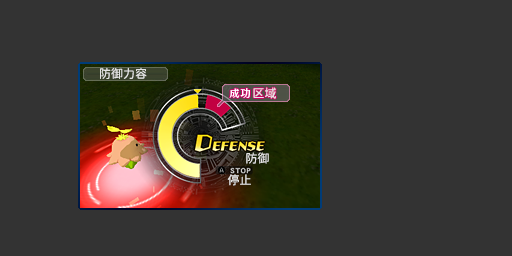
<style>
.page{position:relative;width:512px;height:256px;background:#333333}
.page>*{position:absolute;margin:0}
.t1{font:12px "jiangchengyuanti-400W";color:#e4e4e4}
</style>
<div class="page">
<p class="t1" style="left:100px;top:67px;width:47px;height:12px">防御力容</p>
<p class="t1" style="left:253px;top:87px;width:23px;height:12px">区域</p>
<p class="t1" style="left:246px;top:152px;width:23px;height:12px">防御</p>
<p class="t1" style="left:227px;top:174px;width:24px;height:12px">停止</p>
</div>
